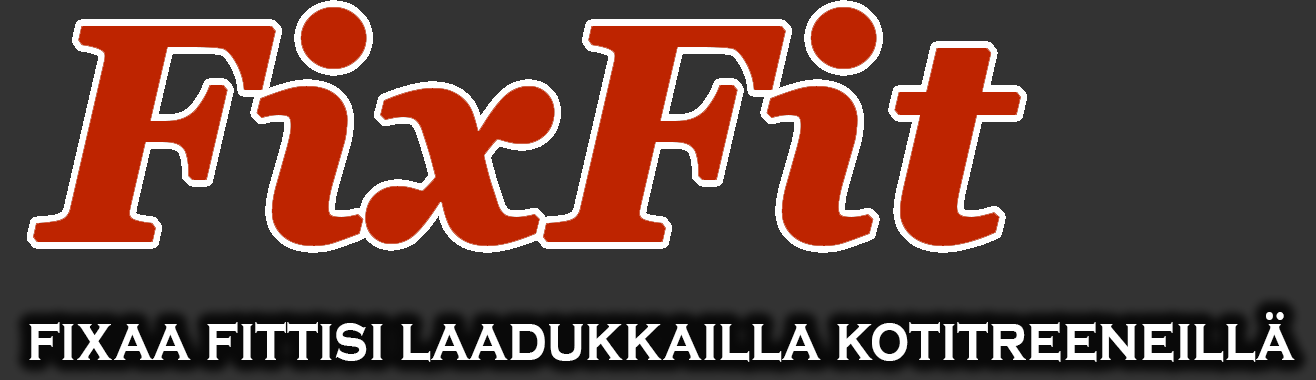
<style>
.page{position:relative;width:1316px;height:380px;background:#333333}
.page>*{position:absolute;margin:0}
.t1{font:66px "CopperplateGothic-Bold";letter-spacing:0.002em;color:#ffffff;scale:0.84 1}
</style>
<div class="page">
<p class="t1" style="left:29px;top:312px;width:1266px;height:50px">fixaa fittisi laadukkailla kotitreeneillä</p>
</div>
